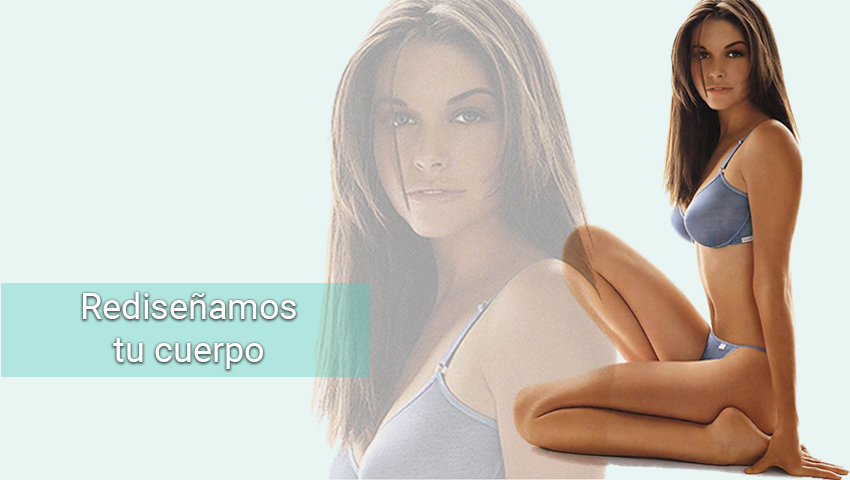
<style>
.page{position:relative;width:850px;height:480px;background:#e8f5f3}
.page>*{position:absolute;margin:0}
.t1{font:36px "Roboto-Regular";color:#ffffff}
</style>
<div class="page">
<p class="t1" style="left:83px;top:292px;width:213px;height:77px;text-align:center">Rediseñamos<br>tu cuerpo</p>
</div>
